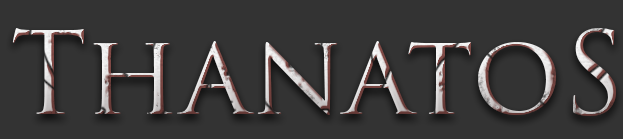
<style>
.page{position:relative;width:623px;height:139px;background:#333333}
.page>*{position:absolute;margin:0}
.t1{font:112px "TrajanPro-Regular"}
</style>
<div class="page">
<p class="t1" style="left:12px;top:27px;width:604px;height:89px">ThanatoS</p>
</div>
